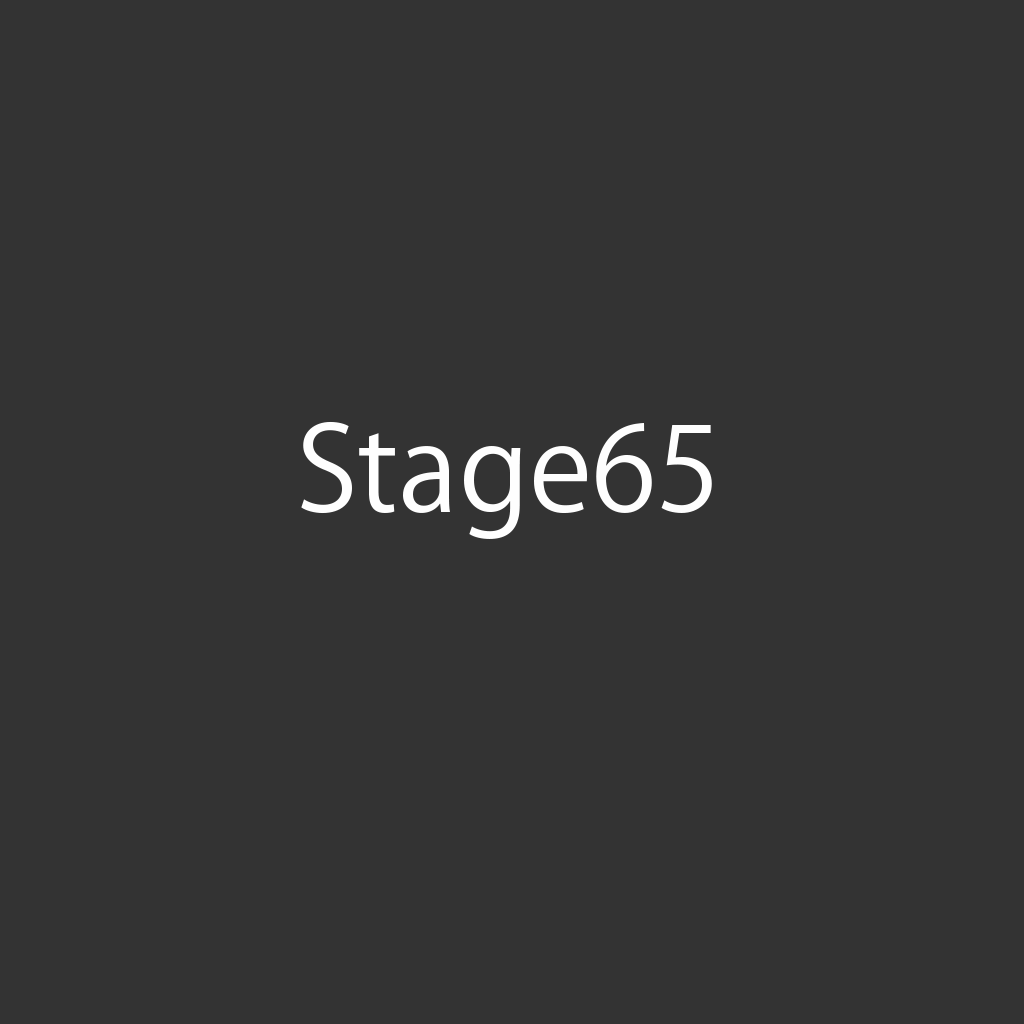
<style>
.page{position:relative;width:1024px;height:1024px;background:#333333}
.page>*{position:absolute;margin:0}
.t1{font:116.7px "KozGoPr6N-Regular";color:#fefefe}
</style>
<div class="page">
<p class="t1" style="left:301px;top:421px;width:411px;height:118px">Stage65</p>
</div>
